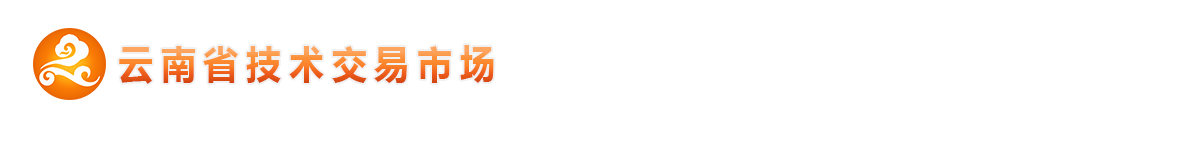
<style>
.page{position:relative;width:1200px;height:150px;background:#ffffff}
.page>*{position:absolute;margin:0}
.t1{font:38.5px "MicrosoftYaHei-Bold";letter-spacing:0.22em;scale:0.91 1}
</style>
<div class="page">
<p class="t1" style="left:119px;top:45px;width:375px;height:39px">云南省技术交易市场</p>
</div>
